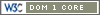
<style>
.page{position:relative;width:100px;height:15px;background:#898e79}
.page>*{position:absolute;margin:0}
.t1{font:8px "Silkscreen";color:#ffffff;text-transform:uppercase}
</style>
<div class="page">
<p class="t1" style="left:30px;top:5px;width:53px;height:5px">dom 1 core</p>
</div>
